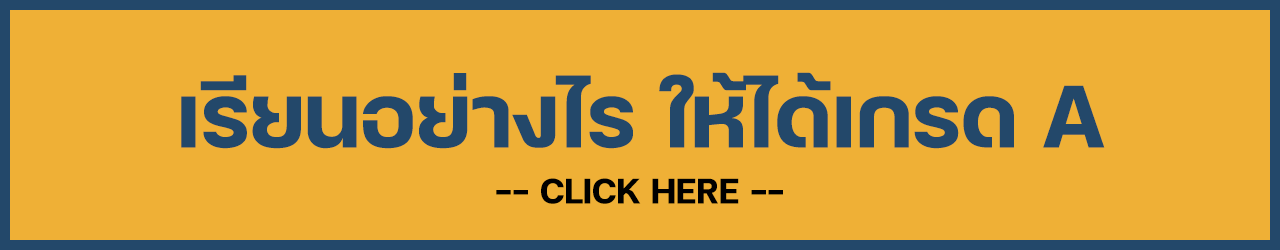
<style>
.page{position:relative;width:1280px;height:250px;background:#efb036}
.page>*{position:absolute;margin:0}
.t1{font:120px "FCMinimalBold";color:#23486a}
.t2{font:48px "FCMinimalBold";color:#000000}
</style>
<div class="page">
<p class="t1" style="left:181px;top:72px;width:924px;height:77px">เรียนอย่างไร ให้ได้เกรด A</p>
<p class="t2" style="left:496px;top:178px;width:287px;height:26px">-- CLICK HERE --</p>
</div>
